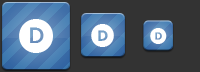
<style>
.page{position:relative;width:200px;height:72px;background:#333333}
.page>*{position:absolute;margin:0}
.t1{font:36px "WhitneyIndexBlack-RoundMd";letter-spacing:-0.025em;color:#ffffff}
.t2{font:24px "WhitneyIndexBlack-RoundBd";letter-spacing:-0.025em;color:#ffffff}
.t3{font:17px "WhitneyIndexBlack-RoundBd";letter-spacing:-0.025em;color:#ffffff}
</style>
<div class="page">
<p class="t1" style="left:19px;top:19px;width:34px;height:34px">D</p>
<p class="t2" style="left:91px;top:24px;width:23px;height:23px">D</p>
<p class="t3" style="left:150px;top:28px;width:17px;height:16px">D</p>
</div>
